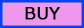
<style>
.page{position:relative;width:84px;height:28px;background:#ee98ed}
.page>*{position:absolute;margin:0}
.t1{font:17px "Verdana";color:#000000;font-weight:bold}
</style>
<div class="page">
<p class="t1" style="left:25px;top:7px;width:35px;height:13px">BUY</p>
</div>
